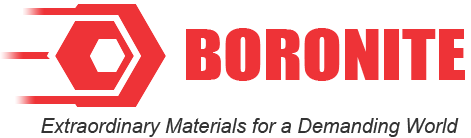
<style>
.page{position:relative;width:471px;height:138px;background:#ffffff}
.page>*{position:absolute;margin:0}
.t1{font:65px "Impact";color:#ee3337;scale:1.12 1}
.t2{font:20px "Arial-ItalicMT";color:#333333}
</style>
<div class="page">
<p class="t1" style="left:186px;top:28px;width:279px;height:53px">BORONITE</p>
<p class="t2" style="left:41px;top:118px;width:418px;height:19px">Extraordinary Materials for a Demanding World</p>
</div>
